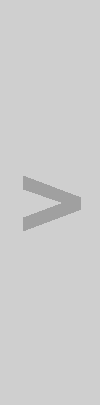
<style>
.page{position:relative;width:100px;height:405px;background:#cfcfcf}
.page>*{position:absolute;margin:0}
.t1{font:100px "Helvetica-Bold";color:#a0a0a0}
</style>
<div class="page">
<p class="t1" style="left:23px;top:176px;width:58px;height:55px">&gt;</p>
</div>
